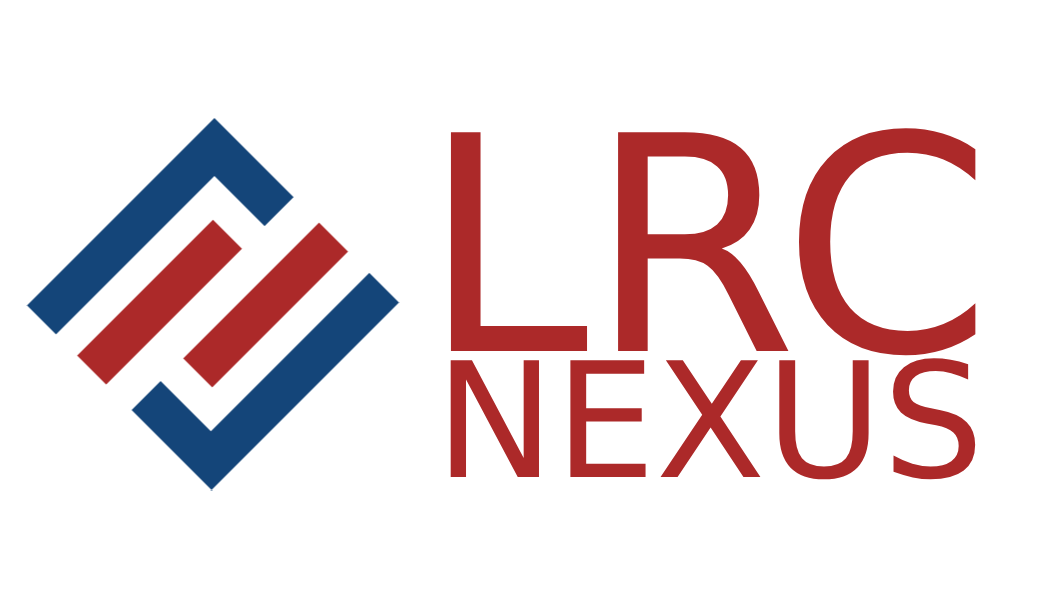
<style>
.page{position:relative;width:1050px;height:600px;background:#ffffff}
.page>*{position:absolute;margin:0}
.t1{font:300px "DejaVuSans";color:#ac2929}
.t2{font:160px "DejaVuSans";color:#ac2929}
</style>
<div class="page">
<p class="t1" style="left:450px;top:128px;width:526px;height:228px">LRC</p>
<p class="t2" style="left:450px;top:358px;width:526px;height:122px">NEXUS</p>
</div>
